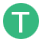
<style>
.page{position:relative;width:42px;height:42px;background:#35b87f}
.page>*{position:absolute;margin:0}
.t1{font:32px "Consolas";letter-spacing:-0.04em;color:#ffffff;scale:1.17 1}
</style>
<div class="page">
<p class="t1" style="left:11px;top:12px;width:19px;height:21px">T</p>
</div>
